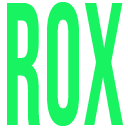
<style>
.page{position:relative;width:128px;height:128px;background:#ffffff}
.page>*{position:absolute;margin:0}
.t1{font:175px "BebasNeue";letter-spacing:0.02em;color:#18f461;scale:0.55 1}
</style>
<div class="page">
<p class="t1" style="left:7px;top:2px;width:116px;height:124px">ROX</p>
</div>
